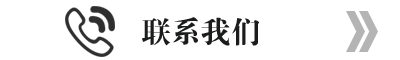
<style>
.page{position:relative;width:400px;height:60px;background:#ffffff}
.page>*{position:absolute;margin:0}
.t1{font:30px "FZDBSJW--GB1-0";color:#1b1c1c}
</style>
<div class="page">
<p class="t1" style="left:142px;top:17px;width:117px;height:29px">联系我们</p>
</div>
